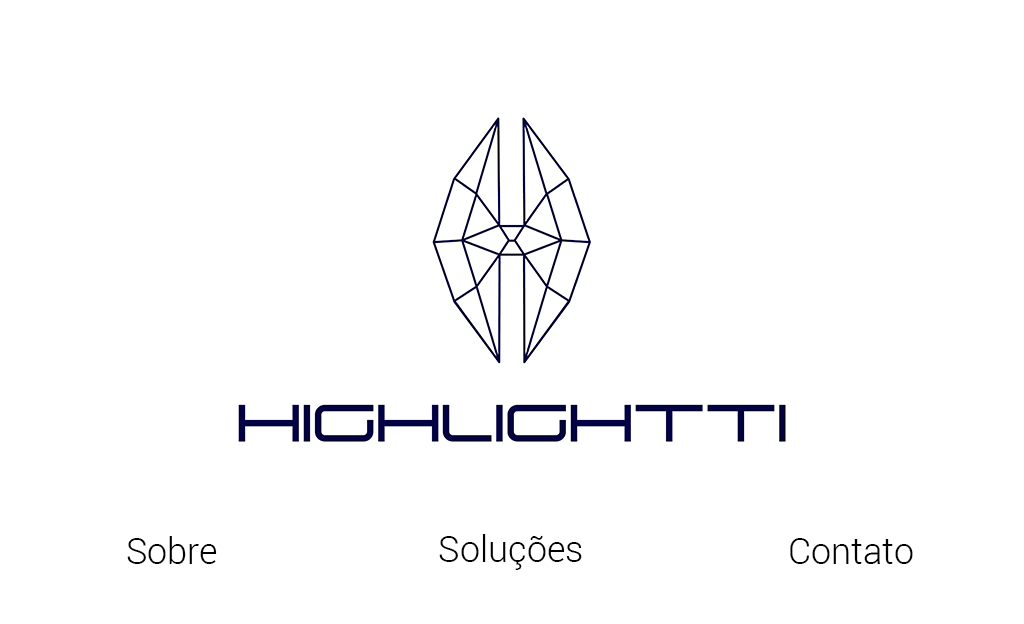
<style>
.page{position:relative;width:1024px;height:624px;background:#ffffff}
.page>*{position:absolute;margin:0}
.t1{font:36px "Roboto-Light";color:#000000}
</style>
<div class="page">
<p class="t1" style="left:439px;top:534px;width:143px;height:36px">Soluções</p>
<p class="t1" style="left:127px;top:536px;width:90px;height:28px">Sobre</p>
<p class="t1" style="left:790px;top:538px;width:123px;height:26px">Contato</p>
</div>
